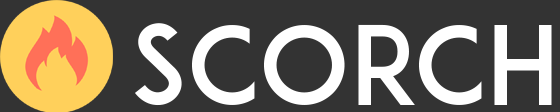
<style>
.page{position:relative;width:560px;height:112px;background:#333333}
.page>*{position:absolute;margin:0}
.t1{font:108.5px "ADAM.CGPRO";color:#ffffff}
</style>
<div class="page">
<p class="t1" style="left:135px;top:23px;width:417px;height:83px">Scorch</p>
</div>
